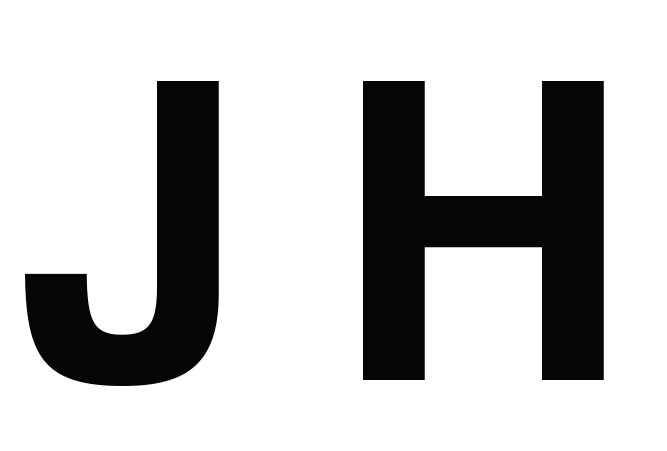
<style>
.page{position:relative;width:667px;height:451px;background:#ffffff}
.page>*{position:absolute;margin:0}
.t1{font:416.7px "FamiliarPro-Bold";letter-spacing:0.2em;color:#050505}
</style>
<div class="page">
<p class="t1" style="left:25px;top:81px;width:579px;height:305px">JH</p>
</div>
